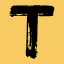
<style>
.page{position:relative;width:64px;height:64px;background:#f7cb62}
.page>*{position:absolute;margin:0}
.t1{font:75px "MrGrieves-Regular";color:#000000}
</style>
<div class="page">
<p class="t1" style="left:9px;top:5px;width:46px;height:54px">T</p>
</div>
